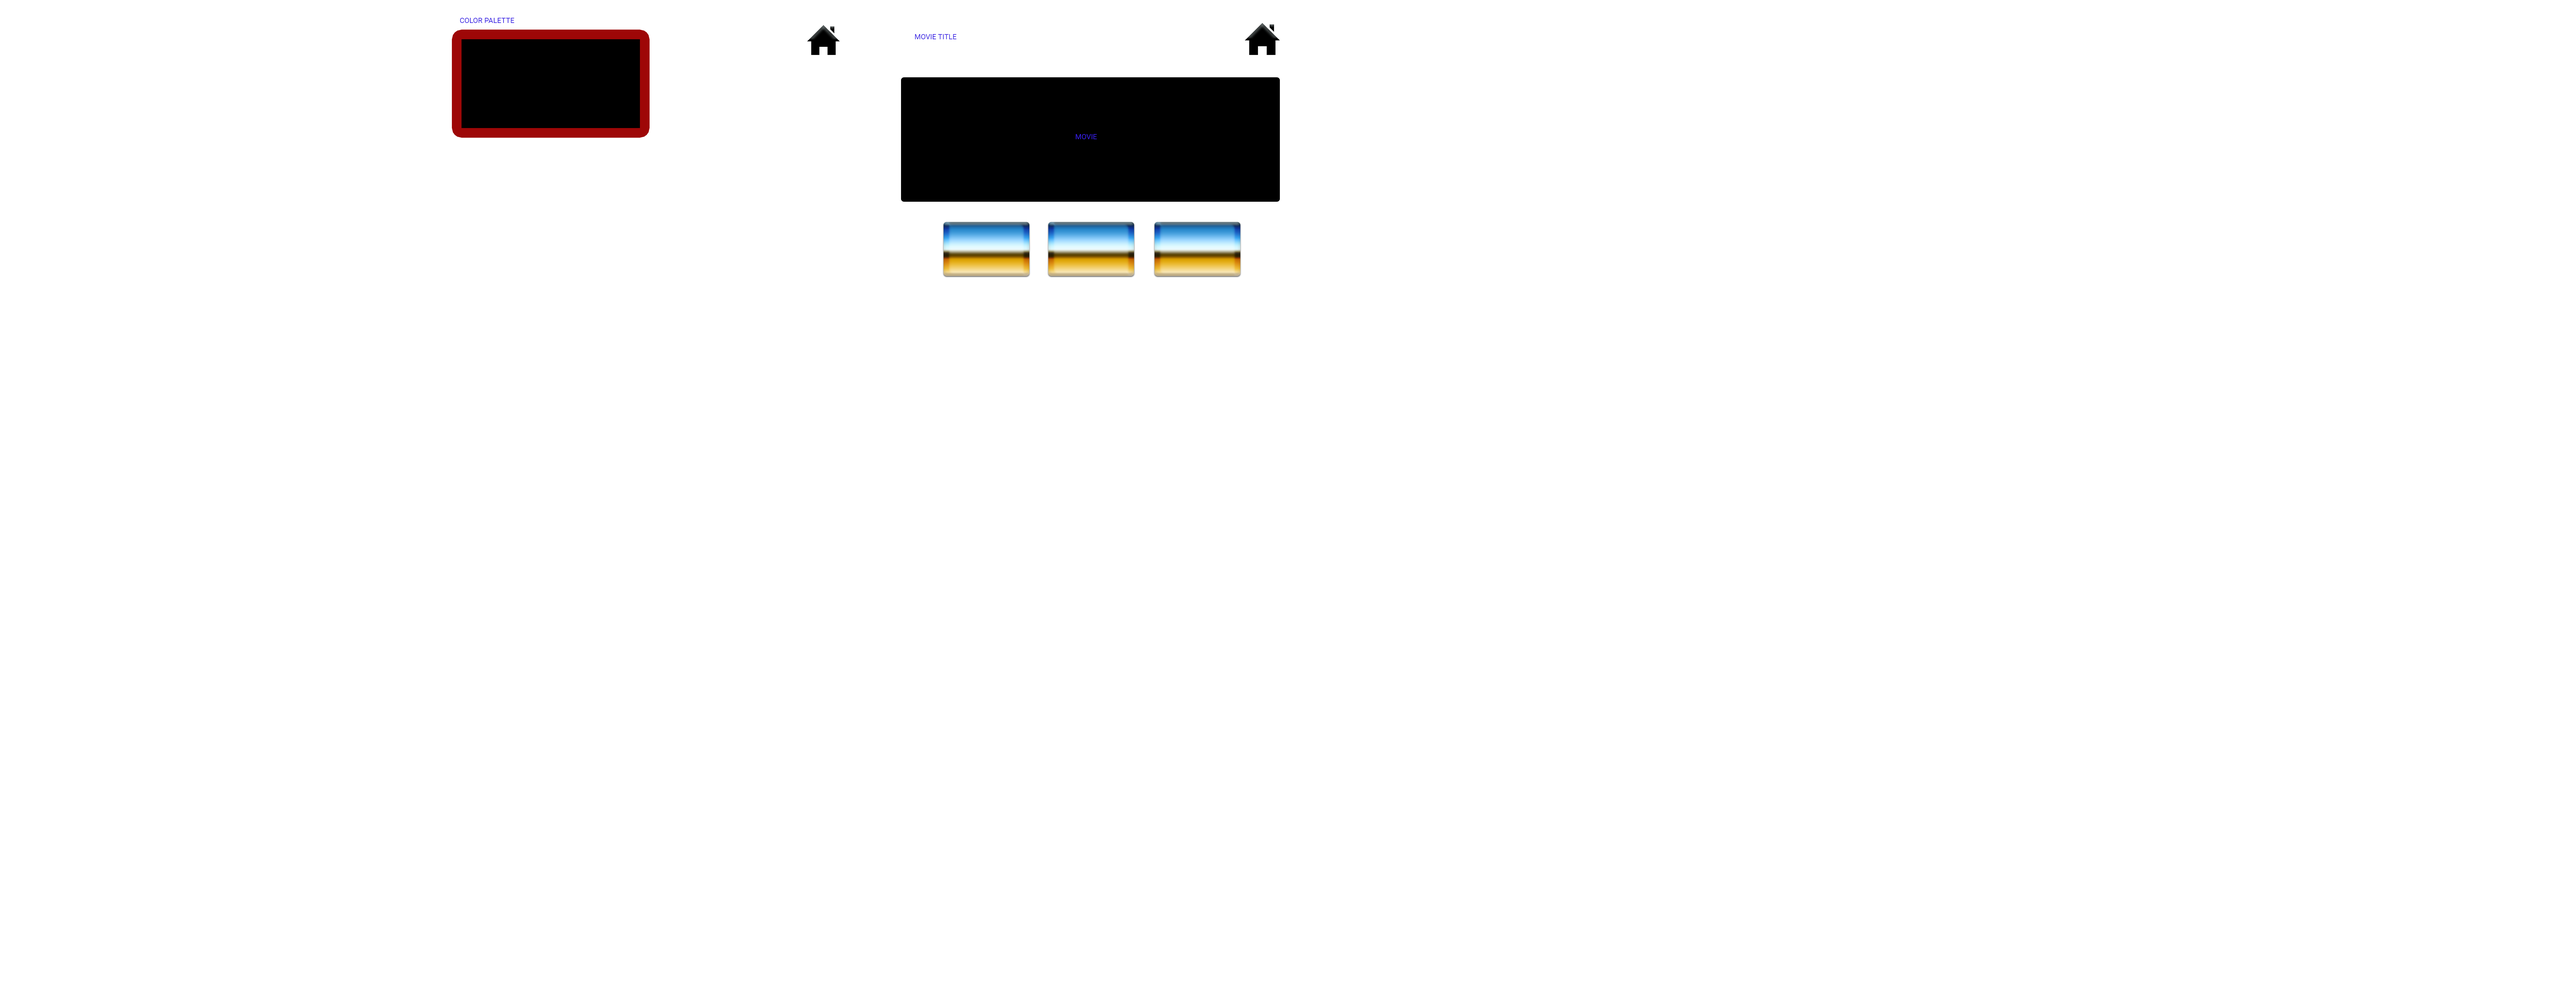
<style>
.page{position:relative;width:2576px;height:1005px;background:#ffffff}
.page>*{position:absolute;margin:0}
.t1{font:7.2px "MyriadPro-Regular";color:#3720e3}
</style>
<div class="page">
<p class="t1" style="left:460px;top:18px;width:54px;height:5px">Color Palette</p>
<p class="t1" style="left:915px;top:34px;width:42px;height:5px">Movie title</p>
<p class="t1" style="left:1076px;top:134px;width:21px;height:5px">Movie</p>
</div>
